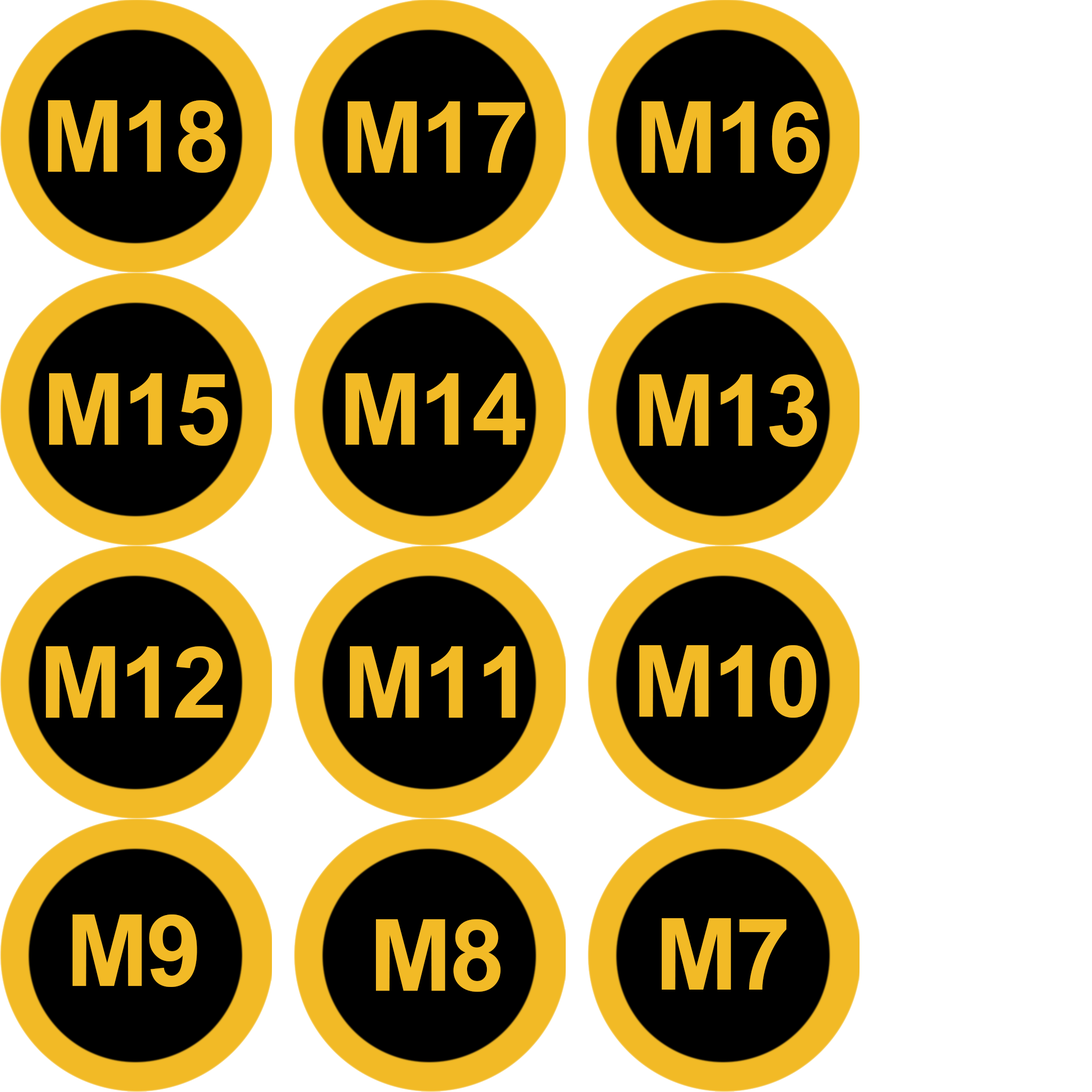
<style>
.page{position:relative;width:1092px;height:1092px;background:#ffffff}
.page>*{position:absolute;margin:0}
.t1{font:99.5px "Arial-BoldMT";letter-spacing:-0.025em;color:#f2ba26}
</style>
<div class="page">
<p class="t1" style="left:48px;top:100px;width:178px;height:73px">M18</p>
<p class="t1" style="left:348px;top:101px;width:177px;height:72px">M17</p>
<p class="t1" style="left:641px;top:101px;width:179px;height:73px">M16</p>
<p class="t1" style="left:49px;top:373px;width:179px;height:73px">M15</p>
<p class="t1" style="left:346px;top:373px;width:179px;height:72px">M14</p>
<p class="t1" style="left:639px;top:374px;width:178px;height:73px">M13</p>
<p class="t1" style="left:46px;top:646px;width:177px;height:72px">M12</p>
<p class="t1" style="left:350px;top:646px;width:166px;height:72px">M11</p>
<p class="t1" style="left:639px;top:645px;width:177px;height:73px">M10</p>
<p class="t1" style="left:73px;top:914px;width:124px;height:73px">M9</p>
<p class="t1" style="left:376px;top:919px;width:125px;height:73px">M8</p>
<p class="t1" style="left:662px;top:918px;width:124px;height:72px">M7</p>
</div>
